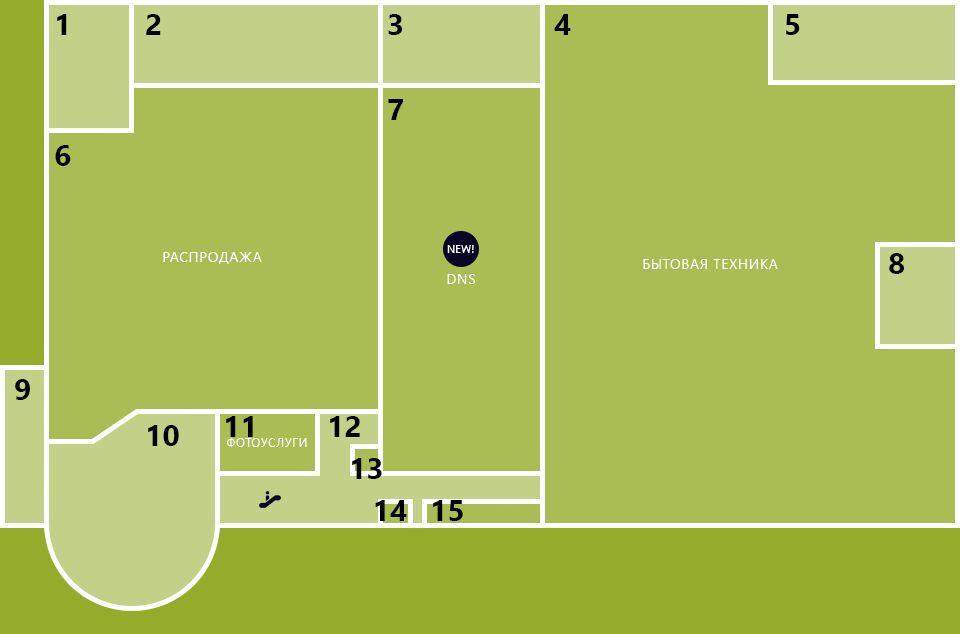
<style>
.page{position:relative;width:960px;height:634px;background:#a9bd54}
.page>*{position:absolute;margin:0}
.t1{font:30px "SegoeUI-Bold";color:#000000}
</style>
<div class="page">
<p class="t1" style="left:57px;top:14px;width:10px;height:21px">1</p>
<p class="t1" style="left:146px;top:14px;width:15px;height:21px">2</p>
<p class="t1" style="left:388px;top:14px;width:15px;height:21px">3</p>
<p class="t1" style="left:554px;top:14px;width:17px;height:21px">4</p>
<p class="t1" style="left:786px;top:14px;width:14px;height:21px">5</p>
<p class="t1" style="left:388px;top:99px;width:15px;height:21px">7</p>
<p class="t1" style="left:55px;top:145px;width:16px;height:21px">6</p>
<p class="t1" style="left:889px;top:253px;width:16px;height:21px">8</p>
<p class="t1" style="left:15px;top:379px;width:15px;height:21px">9</p>
<p class="t1" style="left:148px;top:425px;width:31px;height:21px">10</p>
<p class="t1" style="left:226px;top:416px;width:27px;height:21px">11</p>
<p class="t1" style="left:330px;top:416px;width:30px;height:21px">12</p>
<p class="t1" style="left:352px;top:458px;width:30px;height:21px">13</p>
<p class="t1" style="left:375px;top:500px;width:32px;height:21px">14</p>
<p class="t1" style="left:433px;top:500px;width:30px;height:21px">15</p>
</div>
